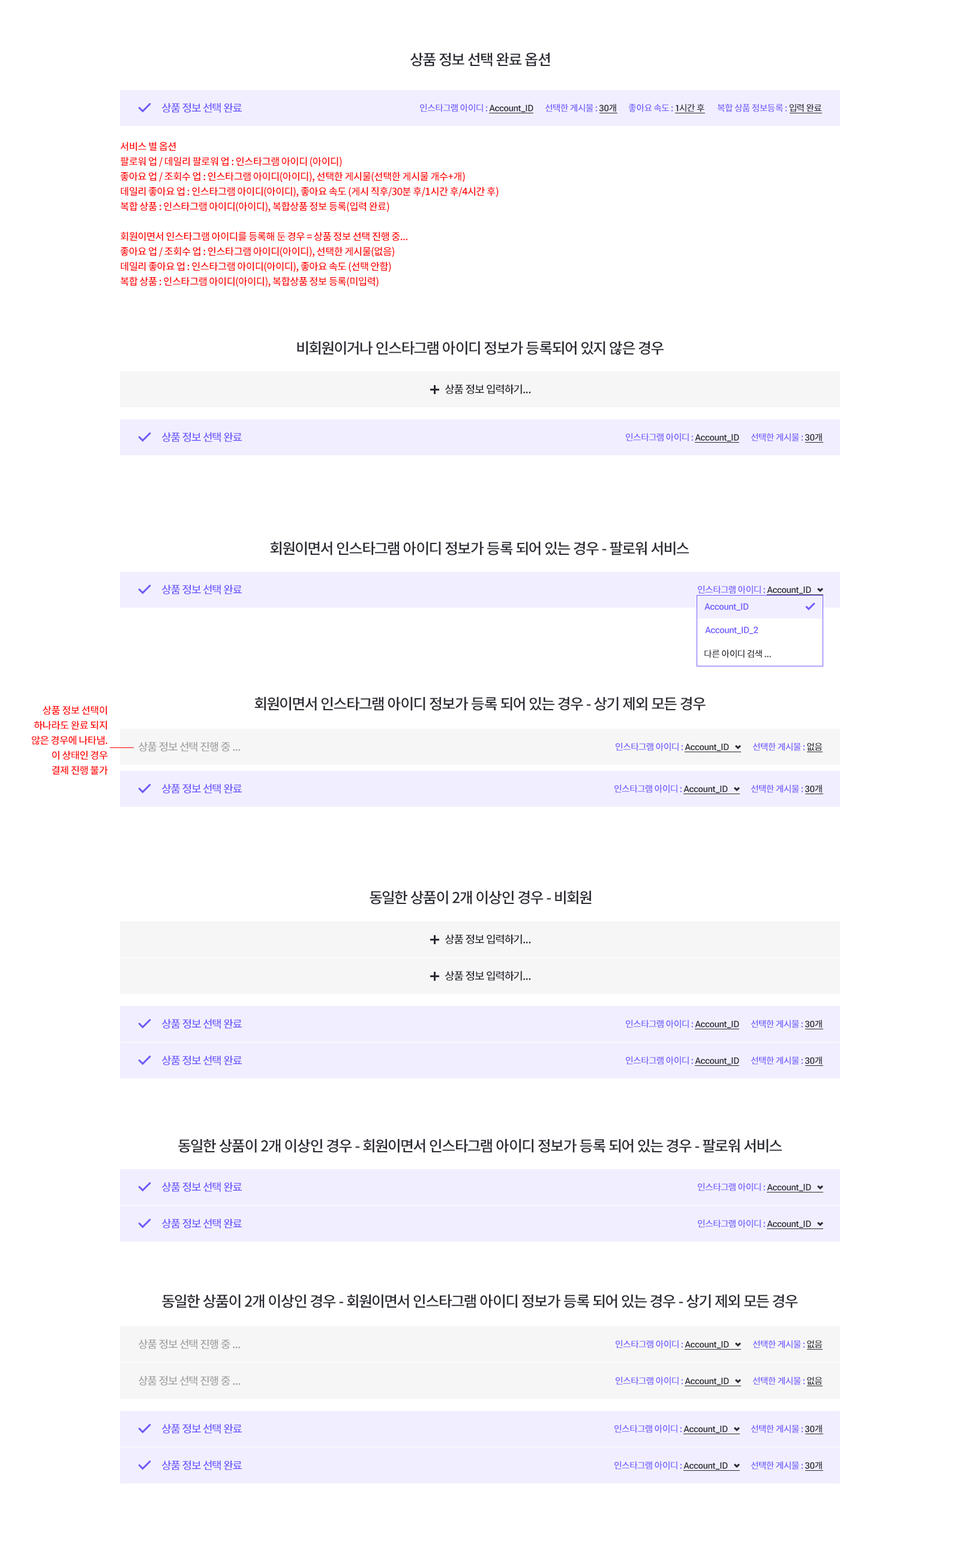
<style>
.page{position:relative;width:960px;height:1559px;background:#ffffff}
.page>*{position:absolute;margin:0}
.t1{font:15px "NotoSansCJKkr-Medium";letter-spacing:-0.04em;color:#2b2c34}
.t2{font:10.8px "NotoSansCJKkr-Medium";letter-spacing:-0.04em;color:#715eff}
.t3{font:9px "NotoSansCJKkr-Medium";letter-spacing:-0.04em;color:#715eff}
.t4{font:9px "Roboto-Medium";letter-spacing:-0.04em;color:#2b2c34}
.t5{font:9px "NotoSansCJKkr-Medium";letter-spacing:-0.04em;color:#2b2c34}
.t6{font:10px/15px "NotoSansCJKkr-Medium";letter-spacing:-0.04em;color:#ff0000}
.t7{font:10.8px "NotoSansCJKkr-Medium";letter-spacing:-0.04em;color:#2b2c34}
.t8{font:9px "Roboto-Medium";letter-spacing:-0.04em;color:#715eff}
.t9{font:10.8px "NotoSansCJKkr-Medium";letter-spacing:-0.04em;color:#a5a5a7}
</style>
<div class="page">
<p class="t1" style="left:410px;top:52px;width:140px;height:15px">상품 정보 선택 완료 옵션</p>
<p class="t2" style="left:161px;top:103px;width:81px;height:10px">상품 정보 선택 완료</p>
<p class="t3" style="left:420px;top:104px;width:113px;height:8px">인스타그램 아이디 : <span class="t4">Account_ID</span></p>
<p class="t3" style="left:545px;top:104px;width:71px;height:8px">선택한 게시물 : <span class="t4">30</span><span class="t5">개</span></p>
<p class="t3" style="left:628px;top:104px;width:76px;height:8px">좋아요 속도 : <span class="t4">1</span><span class="t5">시간 후</span></p>
<p class="t3" style="left:717px;top:104px;width:105px;height:8px">복합 상품 정보등록 : <span class="t5">입력 완료</span></p>
<p class="t6" style="left:120px;top:142px;width:379px;height:145px">서비스 별 옵션<br>팔로워 업 / 데일리 팔로워 업 : 인스타그램 아이디 (아이디)<br>좋아요 업 / 조회수 업 : 인스타그램 아이디(아이디), 선택한 게시물(선택한 게시물 개수+개)<br>데일리 좋아요 업 : 인스타그램 아이디(아이디), 좋아요 속도 (게시 직후/30분 후/1시간 후/4시간 후)<br>복합 상품 : 인스타그램 아이디(아이디), 복합상품 정보 등록(입력 완료)<br><br>회원이면서 인스타그램 아이디를 등록해 둔 경우 = 상품 정보 선택 진행 중...<br>좋아요 업 / 조회수 업 : 인스타그램 아이디(아이디), 선택한 게시물(없음)<br>데일리 좋아요 업 : 인스타그램 아이디(아이디), 좋아요 속도 (선택 안함)<br>복합 상품 : 인스타그램 아이디(아이디), 복합상품 정보 등록(미입력)</p>
<p class="t1" style="left:297px;top:341px;width:367px;height:14px">비회원이거나 인스타그램 아이디 정보가 등록되어 있지 않은 경우</p>
<p class="t7" style="left:445px;top:384px;width:86px;height:10px">상품 정보 입력하기...</p>
<p class="t2" style="left:161px;top:432px;width:81px;height:10px">상품 정보 선택 완료</p>
<p class="t3" style="left:626px;top:433px;width:113px;height:9px">인스타그램 아이디 : <span class="t4">Account_ID</span></p>
<p class="t3" style="left:751px;top:433px;width:71px;height:9px">선택한 게시물 : <span class="t4">30</span><span class="t5">개</span></p>
<p class="t1" style="left:270px;top:541px;width:419px;height:15px">회원이면서 인스타그램 아이디 정보가 등록 되어 있는 경우 - 팔로워 서비스</p>
<p class="t2" style="left:161px;top:584px;width:81px;height:11px">상품 정보 선택 완료</p>
<p class="t3" style="left:698px;top:586px;width:113px;height:8px">인스타그램 아이디 : <span class="t4">Account_ID</span></p>
<p class="t8" style="left:704px;top:603px;width:45px;height:8px">Account_ID</p>
<p class="t8" style="left:705px;top:626px;width:53px;height:8px">Account_ID_2</p>
<p class="t5" style="left:704px;top:650px;width:67px;height:8px">다른 아이디 검색 ...</p>
<p class="t1" style="left:254px;top:697px;width:452px;height:14px">회원이면서 인스타그램 아이디 정보가 등록 되어 있는 경우 - 상기 제외 모든 경우</p>
<p class="t6" style="left:32px;top:706px;width:76px;height:69px;text-align:right">상품 정보 선택이<br>하나라도 완료 되지<br>않은 경우에 나타냄.<br>이 상태인 경우<br>결제 진행 불가</p>
<p class="t9" style="left:138px;top:742px;width:103px;height:10px">상품 정보 선택 진행 중 ...</p>
<p class="t3" style="left:616px;top:743px;width:113px;height:8px">인스타그램 아이디 : <span class="t4">Account_ID</span></p>
<p class="t3" style="left:752px;top:743px;width:71px;height:8px">선택한 게시물 : <span class="t5">없음</span></p>
<p class="t2" style="left:161px;top:784px;width:81px;height:10px">상품 정보 선택 완료</p>
<p class="t3" style="left:614px;top:785px;width:114px;height:8px">인스타그램 아이디 : <span class="t4">Account_ID</span></p>
<p class="t3" style="left:751px;top:785px;width:71px;height:8px">선택한 게시물 : <span class="t4">30</span><span class="t5">개</span></p>
<p class="t1" style="left:370px;top:890px;width:222px;height:15px">동일한 상품이 2개 이상인 경우 - 비회원</p>
<p class="t7" style="left:445px;top:934px;width:86px;height:10px">상품 정보 입력하기...</p>
<p class="t7" style="left:445px;top:971px;width:86px;height:10px">상품 정보 입력하기...</p>
<p class="t2" style="left:161px;top:1019px;width:81px;height:10px">상품 정보 선택 완료</p>
<p class="t3" style="left:626px;top:1020px;width:113px;height:8px">인스타그램 아이디 : <span class="t4">Account_ID</span></p>
<p class="t3" style="left:751px;top:1020px;width:71px;height:8px">선택한 게시물 : <span class="t4">30</span><span class="t5">개</span></p>
<p class="t2" style="left:161px;top:1055px;width:81px;height:11px">상품 정보 선택 완료</p>
<p class="t3" style="left:626px;top:1057px;width:113px;height:8px">인스타그램 아이디 : <span class="t4">Account_ID</span></p>
<p class="t3" style="left:751px;top:1057px;width:71px;height:8px">선택한 게시물 : <span class="t4">30</span><span class="t5">개</span></p>
<p class="t1" style="left:178px;top:1139px;width:604px;height:14px">동일한 상품이 2개 이상인 경우 - 회원이면서 인스타그램 아이디 정보가 등록 되어 있는 경우 - 팔로워 서비스</p>
<p class="t2" style="left:161px;top:1182px;width:81px;height:10px">상품 정보 선택 완료</p>
<p class="t3" style="left:698px;top:1183px;width:113px;height:9px">인스타그램 아이디 : <span class="t4">Account_ID</span></p>
<p class="t2" style="left:161px;top:1219px;width:81px;height:10px">상품 정보 선택 완료</p>
<p class="t3" style="left:698px;top:1220px;width:113px;height:8px">인스타그램 아이디 : <span class="t4">Account_ID</span></p>
<p class="t1" style="left:162px;top:1294px;width:636px;height:15px">동일한 상품이 2개 이상인 경우 - 회원이면서 인스타그램 아이디 정보가 등록 되어 있는 경우 - 상기 제외 모든 경우</p>
<p class="t9" style="left:138px;top:1339px;width:103px;height:10px">상품 정보 선택 진행 중 ...</p>
<p class="t3" style="left:616px;top:1340px;width:113px;height:9px">인스타그램 아이디 : <span class="t4">Account_ID</span></p>
<p class="t3" style="left:752px;top:1340px;width:71px;height:9px">선택한 게시물 : <span class="t5">없음</span></p>
<p class="t9" style="left:138px;top:1376px;width:103px;height:10px">상품 정보 선택 진행 중 ...</p>
<p class="t3" style="left:616px;top:1377px;width:113px;height:8px">인스타그램 아이디 : <span class="t4">Account_ID</span></p>
<p class="t3" style="left:752px;top:1377px;width:71px;height:8px">선택한 게시물 : <span class="t5">없음</span></p>
<p class="t2" style="left:161px;top:1424px;width:81px;height:10px">상품 정보 선택 완료</p>
<p class="t3" style="left:614px;top:1425px;width:114px;height:8px">인스타그램 아이디 : <span class="t4">Account_ID</span></p>
<p class="t3" style="left:751px;top:1425px;width:71px;height:8px">선택한 게시물 : <span class="t4">30</span><span class="t5">개</span></p>
<p class="t2" style="left:161px;top:1460px;width:81px;height:11px">상품 정보 선택 완료</p>
<p class="t3" style="left:614px;top:1462px;width:114px;height:8px">인스타그램 아이디 : <span class="t4">Account_ID</span></p>
<p class="t3" style="left:751px;top:1462px;width:71px;height:8px">선택한 게시물 : <span class="t4">30</span><span class="t5">개</span></p>
</div>
